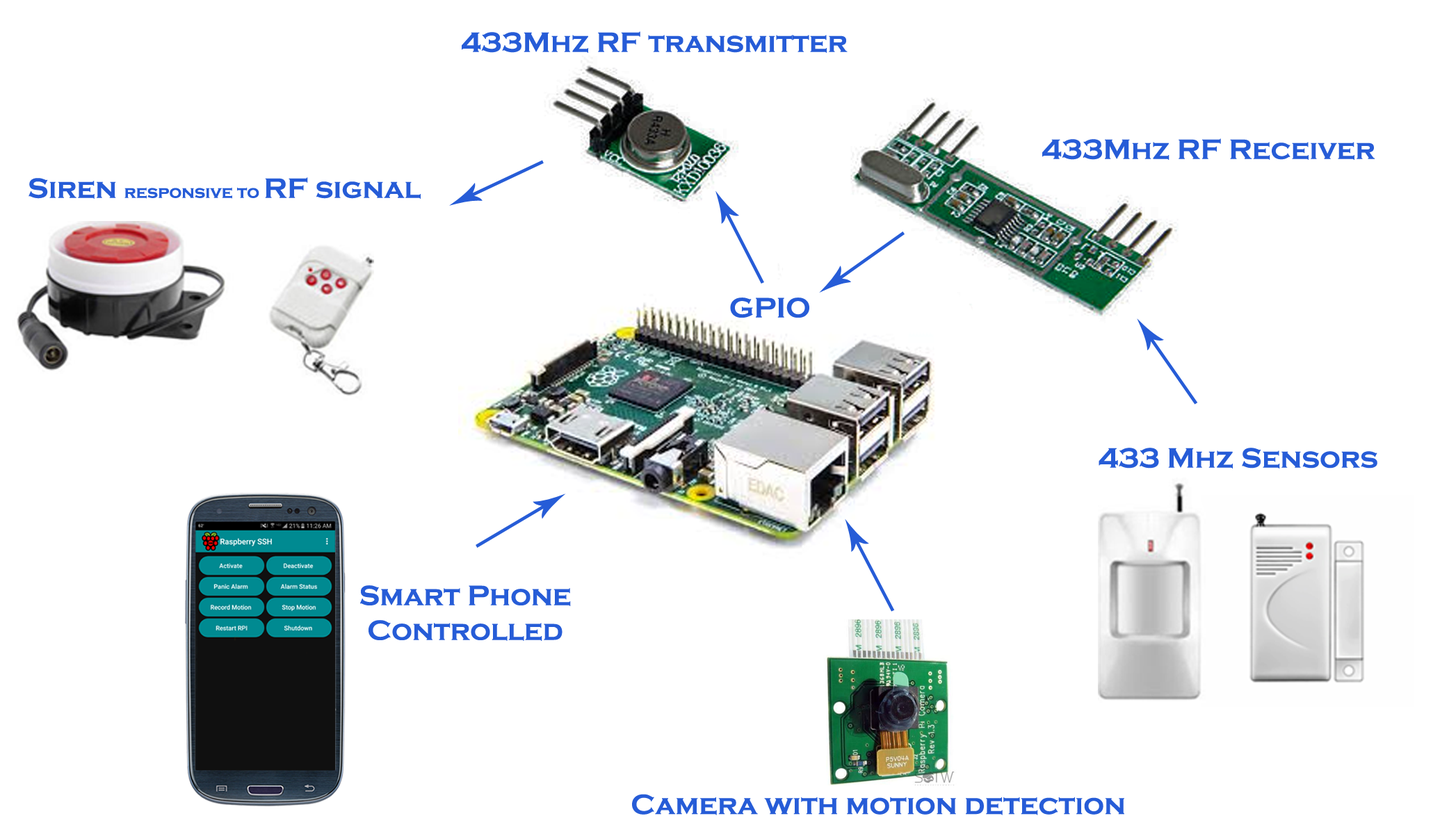
<style>
.page{position:relative;width:1449px;height:823px;background:#ffffff}
.page>*{position:absolute;margin:0}
.t1{font:29px "CopperplateGothic-Bold";color:#265cd7}
.t2{font:17.4px "CopperplateGothic-Bold";color:#265cd7}
</style>
<div class="page">
<p class="t1" style="left:462px;top:31px;width:385px;height:22px">433Mhz RF transmitter</p>
<p class="t1" style="left:1042px;top:138px;width:333px;height:22px">433Mhz RF Receiver</p>
<p class="t2" style="left:29px;top:177px;width:392px;height:22px"><span class="t1">Siren </span>responsive to <span class="t1">RF signal</span></p>
<p class="t1" style="left:730px;top:298px;width:79px;height:20px">GPIO</p>
<p class="t1" style="left:1098px;top:448px;width:279px;height:21px">433 Mhz Sensors</p>
<p class="t1" style="left:360px;top:585px;width:211px;height:56px;text-align:center">Smart Phone<br>Controlled</p>
<p class="t1" style="left:632px;top:794px;width:492px;height:21px">Camera with motion detection</p>
</div>
